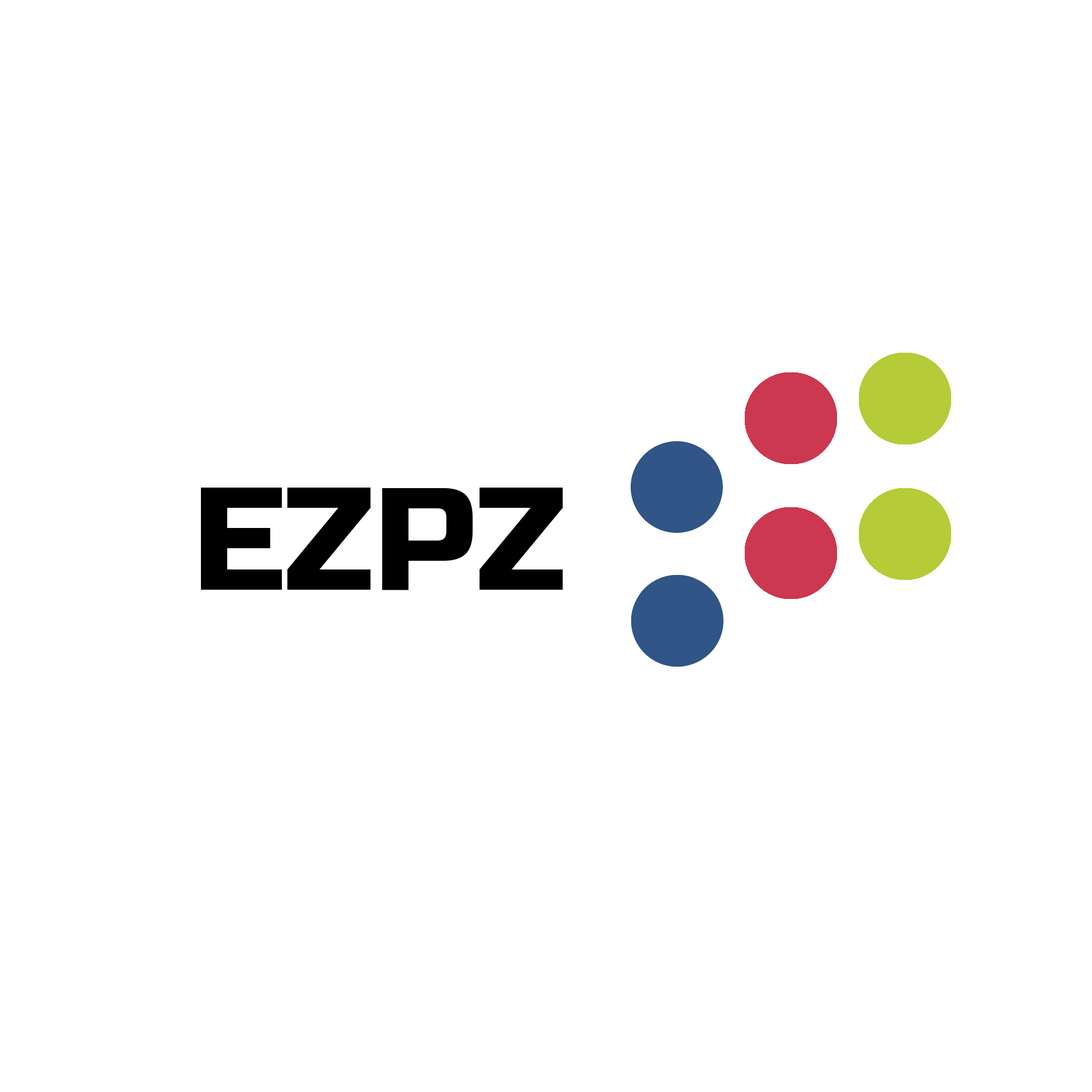
<style>
.page{position:relative;width:1092px;height:1092px;background:#ffffff}
.page>*{position:absolute;margin:0}
.t1{font:145.6px "RussoOne";color:#000000}
</style>
<div class="page">
<p class="t1" style="left:201px;top:488px;width:362px;height:102px">EZPZ</p>
</div>
